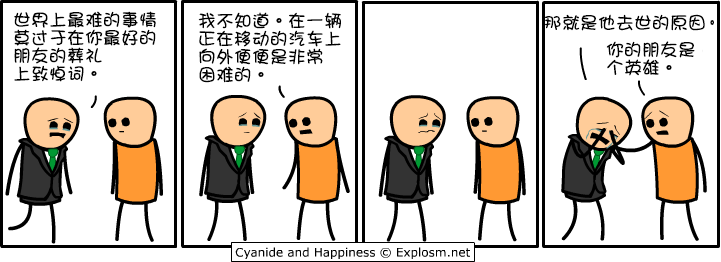
<style>
.page{position:relative;width:721px;height:262px;background:#ffffff}
.page>*{position:absolute;margin:0}
.t1{font:18px/18px "DFGirl";color:#000000}
.t2{font:18px "DFGirl";color:#000000}
.t3{font:18px "DFGirl";color:#000000;scale:0.69 1}
</style>
<div class="page">
<p class="t1" style="left:14px;top:11px;width:142px;height:71px">世界上最难的事情<br>莫过于在你最好的<br>朋友的葬礼<br>上致悼词。</p>
<p class="t1" style="left:198px;top:12px;width:143px;height:71px">我不知道。在一辆<br>正在移动的汽车上<br>向外便便是非常<br>困难的。</p>
<p class="t2" style="left:545px;top:14px;width:169px;height:17px">那就是他去世的原因<span class="t3">。</span></p>
<p class="t1" style="left:606px;top:41px;width:89px;height:35px">你的朋友是<br>个英雄。</p>
</div>
